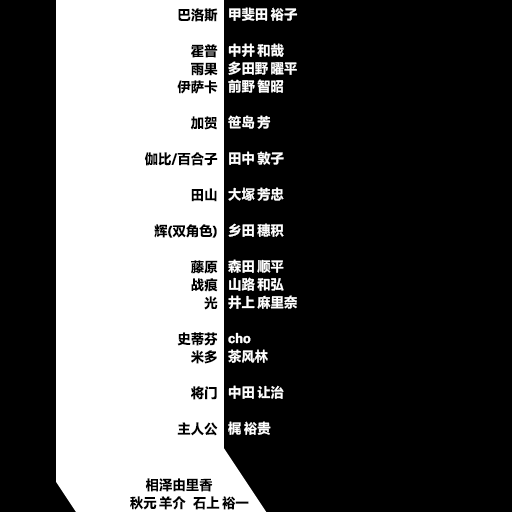
<style>
.page{position:relative;width:512px;height:512px;background:#000000}
.page>*{position:absolute;margin:0}
.t1{font:13.5px/18px "FZLTHProGlobal-Bold";letter-spacing:0.005em;color:#000000}
.t2{font:13.5px/18px "FZLTHProGlobal-Bold";letter-spacing:0.005em;color:#ffffff}
</style>
<div class="page">
<p class="t1" style="left:144px;top:8px;width:74px;height:428px;text-align:right">巴洛斯<br><br>霍普<br>雨果<br>伊萨卡<br><br>加贺<br><br>伽比/百合子<br><br>田山<br><br>辉(双角色)<br><br>藤原<br>战痕<br>光<br><br>史蒂芬<br>米多<br><br>将门<br><br>主人公</p>
<p class="t2" style="left:228px;top:7px;width:70px;height:428px">甲斐田 裕子<br><br>中井 和哉<br>多田野 曜平<br>前野 智昭<br><br>笹岛 芳<br><br>田中 敦子<br><br>大塚 芳忠<br><br>乡田 穗积<br><br>森田 顺平<br>山路 和弘<br>井上 麻里奈<br><br>cho<br>茶风林<br><br>中田 让治<br><br>梶 裕贵</p>
<p class="t1" style="left:130px;top:478px;width:119px;height:32px">相泽由里香   <br>秋元 羊介   石上 裕一</p>
</div>
